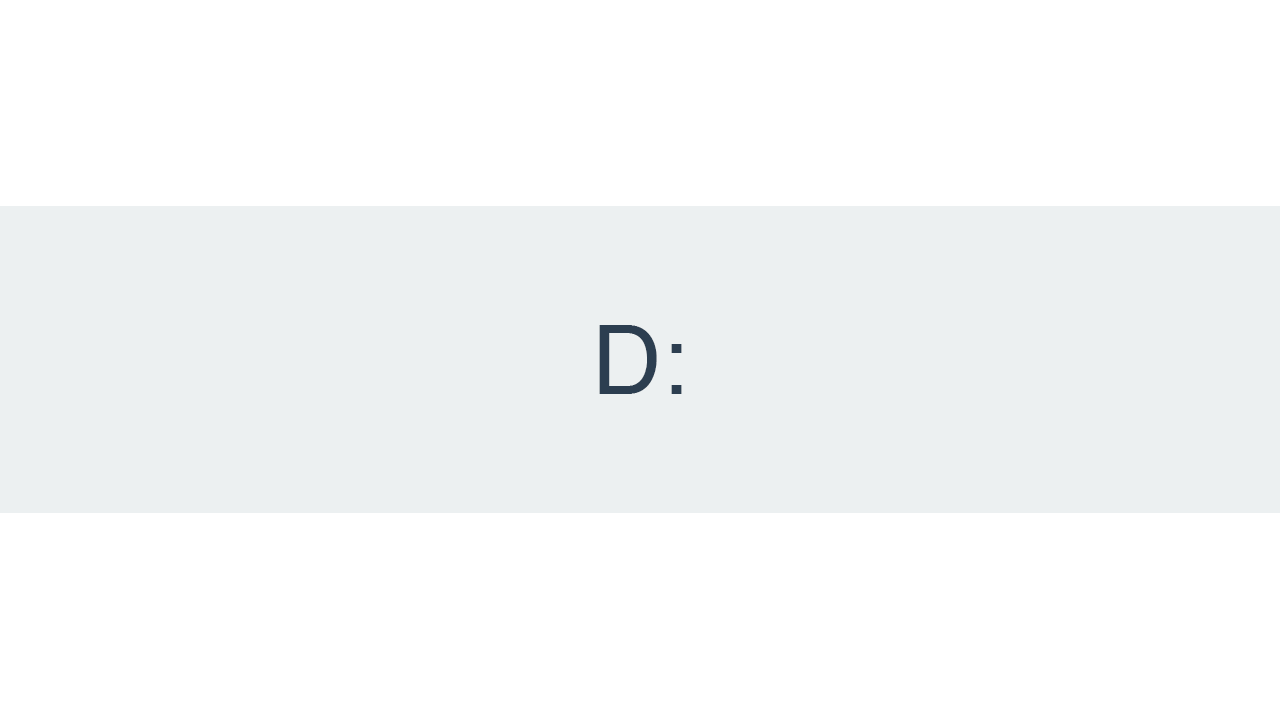
<style>
.page{position:relative;width:1280px;height:720px;background:#ffffff}
.page>*{position:absolute;margin:0}
.t1{font:96px "Helvetica";color:#2c3e50}
</style>
<div class="page">
<p class="t1" style="left:599px;top:325px;width:83px;height:69px">D:</p>
</div>
